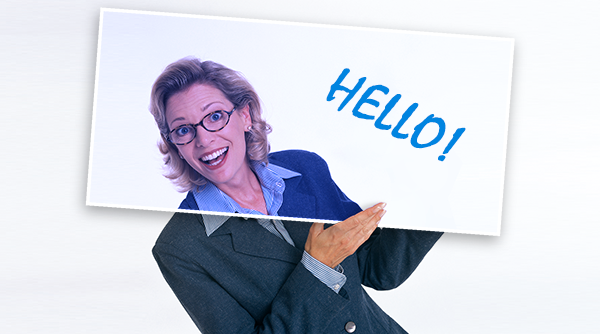
<style>
.page{position:relative;width:600px;height:334px}
.page>*{position:absolute;margin:0}
.t1{font:56.4px "Mistral";color:#0084e0;font-weight:bold}
</style>
<div class="page">
<p class="t1" style="left:326px;top:68px;width:140px;height:94px;rotate:28deg">HELLO!</p>
</div>
